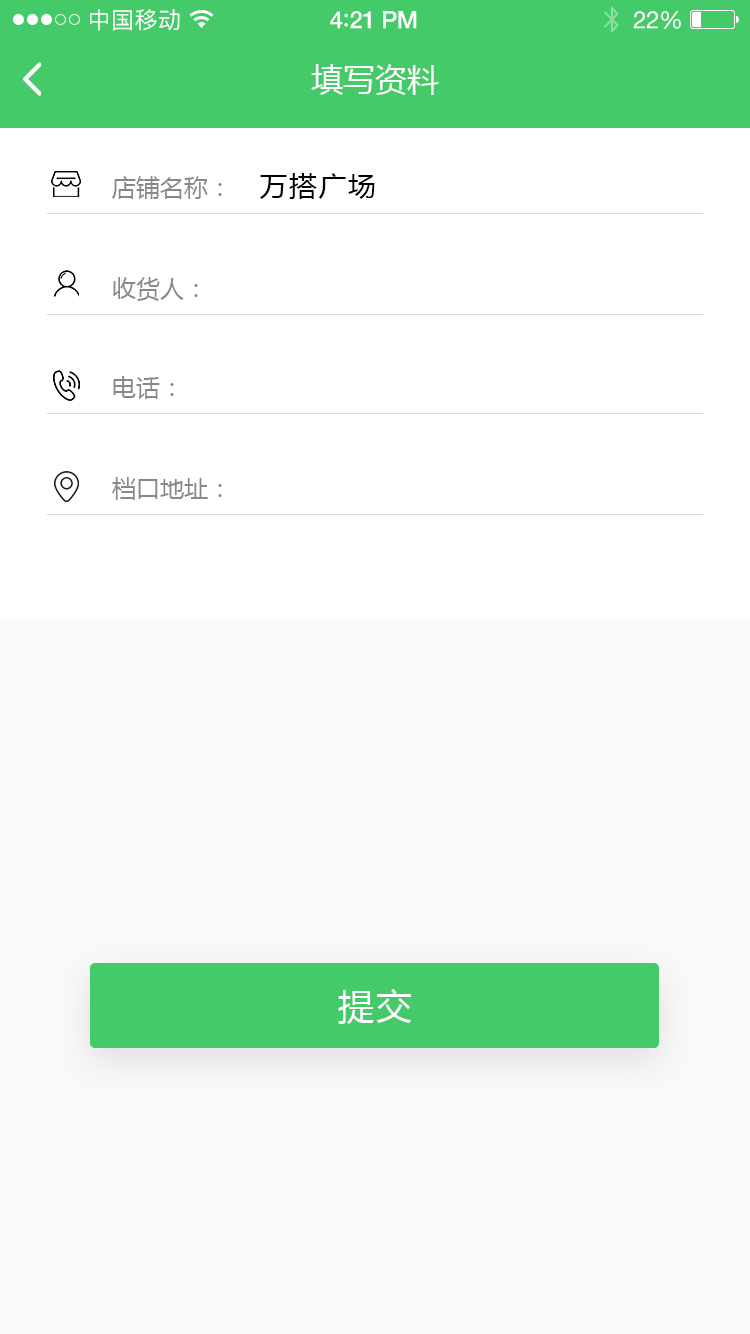
<style>
.page{position:relative;width:750px;height:1334px;background:#f9f9f9}
.page>*{position:absolute;margin:0}
.t1{font:23px "PingFangSC-Regular";letter-spacing:0.02em;color:#ffffff}
.t2{font:24px "HelveticaNeue-Medium";letter-spacing:-0.02em;color:#ffffff}
.t3{font:26px "Avenir-Medium";letter-spacing:-0.02em;color:#ffffff}
.t4{font:24px "HelveticaNeue";letter-spacing:-0.02em;color:#ffffff}
.t5{font:32px "MicrosoftYaHei";color:#ffffff;text-transform:uppercase}
.t6{font:28px "MicrosoftYaHei";letter-spacing:0.05em;color:#010101;text-transform:uppercase}
.t7{font:24px "MicrosoftYaHei";color:#888888;text-transform:uppercase}
.t8{font:36px "MicrosoftYaHei";letter-spacing:0.06em;color:#ffffff;text-transform:uppercase}
</style>
<div class="page">
<p class="t1" style="left:90px;top:9px;width:90px;height:22px">中国移动</p>
<p class="t2" style="left:330px;top:11px;width:87px;height:18px">4<span class="t3">:</span>21 PM</p>
<p class="t4" style="left:633px;top:11px;width:48px;height:18px">22%</p>
<p class="t5" style="left:311px;top:64px;width:128px;height:31px">填写资料</p>
<p class="t6" style="left:260px;top:173px;width:115px;height:26px">万搭广场</p>
<p class="t7" style="left:112px;top:176px;width:110px;height:23px">店铺名称：</p>
<p class="t7" style="left:113px;top:277px;width:85px;height:24px">收货人：</p>
<p class="t7" style="left:113px;top:376px;width:61px;height:23px">电话：</p>
<p class="t7" style="left:112px;top:477px;width:110px;height:23px">档口地址：</p>
<p class="t8" style="left:338px;top:989px;width:74px;height:35px">提交</p>
</div>
